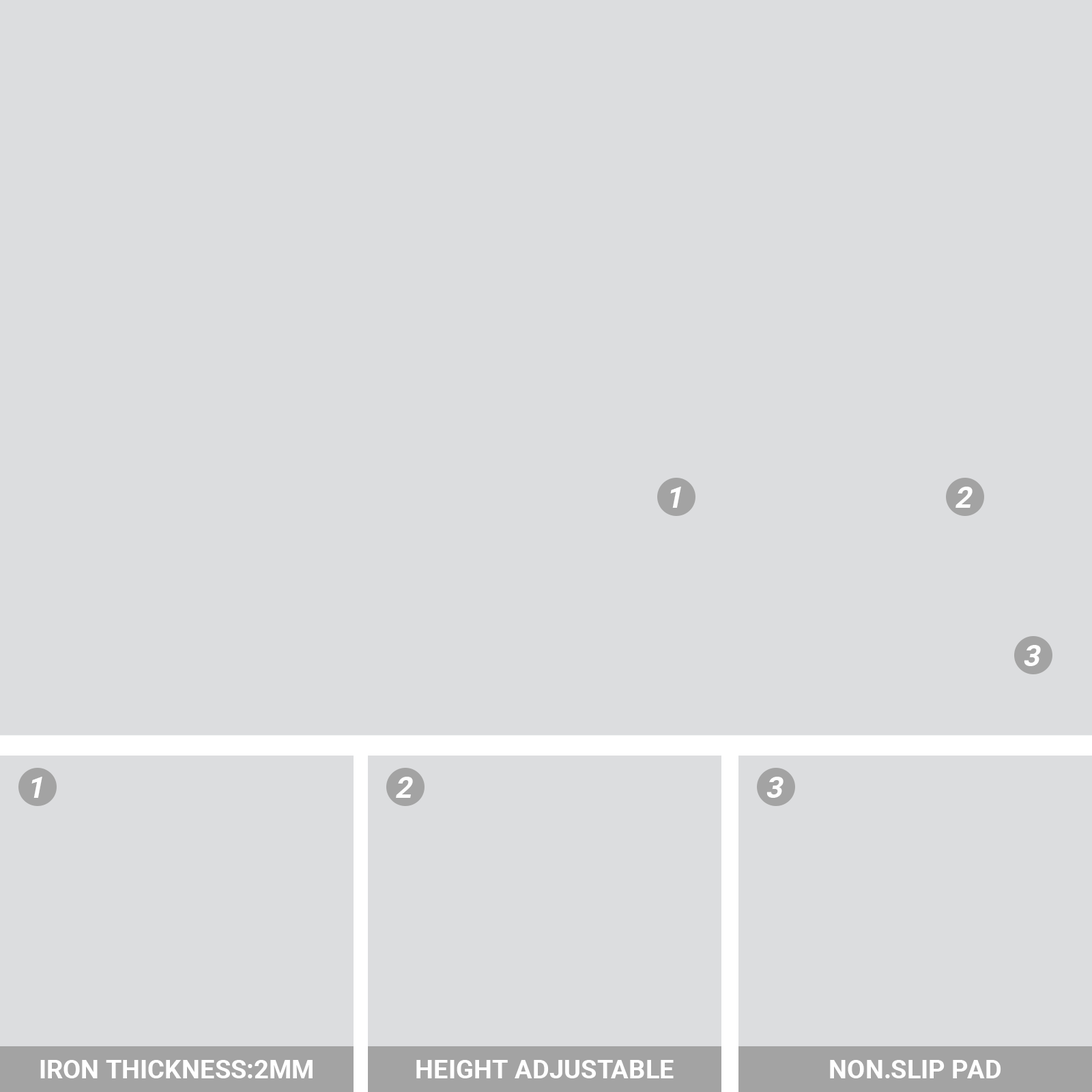
<style>
.page{position:relative;width:1092px;height:1092px;background:#dcdddf}
.page>*{position:absolute;margin:0}
.t1{font:29.3px "Roboto-Bold";color:#ffffff;font-style:italic}
.t2{font:26.2px "Roboto-Bold";color:#ffffff}
</style>
<div class="page">
<p class="t1" style="left:670px;top:487px;width:11px;height:21px">1</p>
<p class="t1" style="left:955px;top:487px;width:18px;height:21px">2</p>
<p class="t1" style="left:1024px;top:645px;width:17px;height:21px">3</p>
<p class="t1" style="left:31px;top:777px;width:11px;height:21px">1</p>
<p class="t1" style="left:396px;top:777px;width:17px;height:21px">2</p>
<p class="t1" style="left:766px;top:777px;width:17px;height:21px">3</p>
<p class="t2" style="left:40px;top:1060px;width:273px;height:18px">IRON THICKNESS:2MM</p>
<p class="t2" style="left:416px;top:1060px;width:258px;height:18px">HEIGHT ADJUSTABLE</p>
<p class="t2" style="left:830px;top:1060px;width:171px;height:18px">NON.SLIP PAD</p>
</div>
